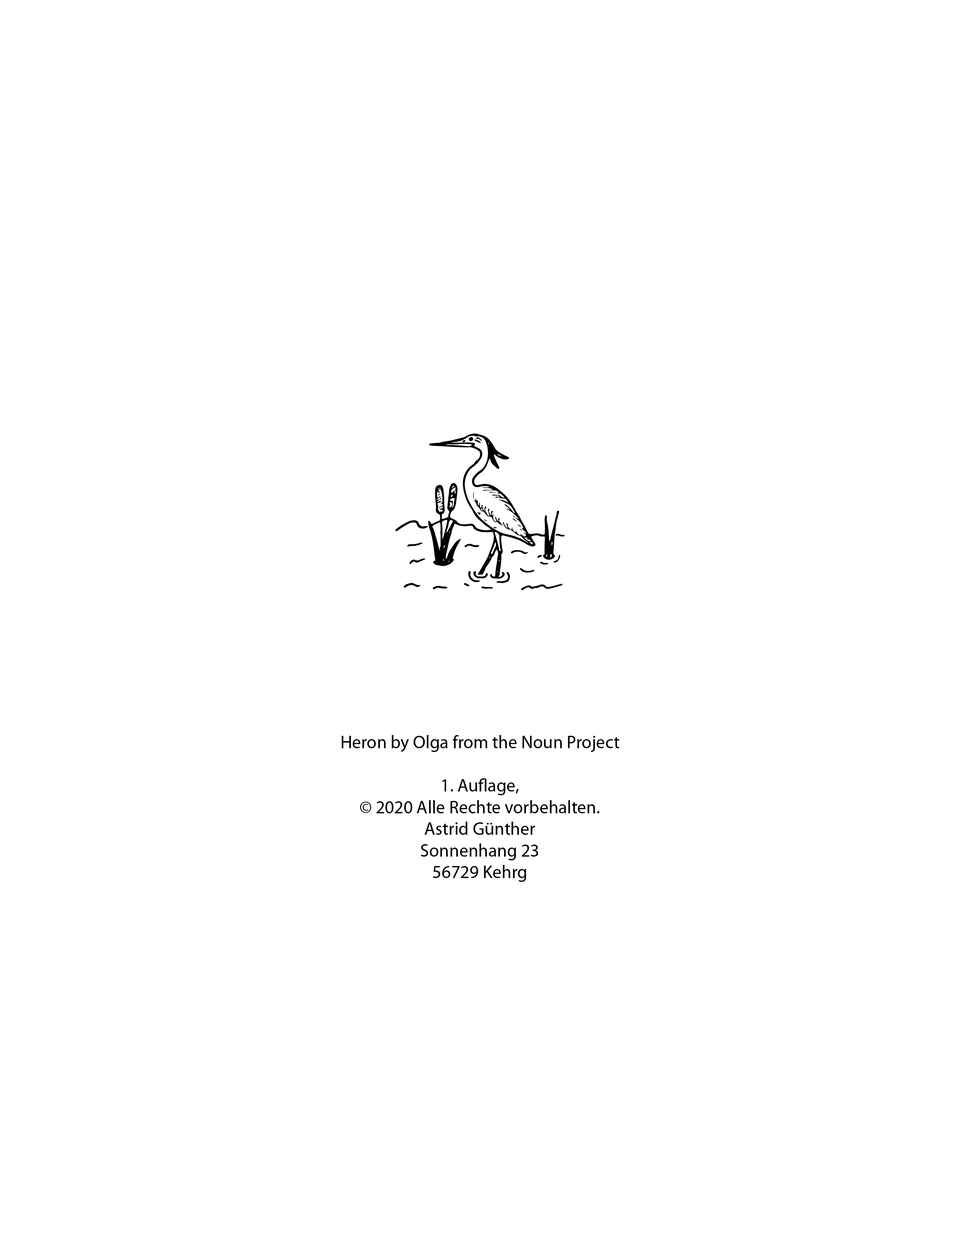
<style>
.page{position:relative;width:960px;height:1242px;background:#ffffff}
.page>*{position:absolute;margin:0}
.t1{font:18.1px "MyriadPro-Regular";color:#000000}
</style>
<div class="page">
<p class="t1" style="left:341px;top:735px;width:278px;height:147px;text-align:center">Heron by Olga from the Noun Project<br><br>1. Auflage, <br>© 2020 Alle Rechte vorbehalten.<br>Astrid Günther<br>Sonnenhang 23<br>56729 Kehrg</p>
</div>
